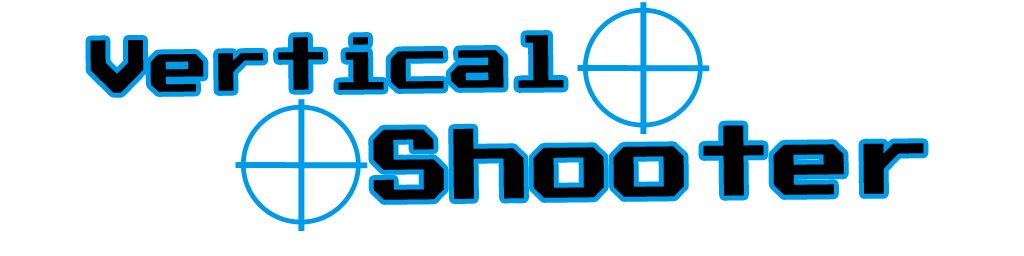
<style>
.page{position:relative;width:1024px;height:256px;background:#ffffff}
.page>*{position:absolute;margin:0}
.t1{font:60px "Atari-Font-Full-Version";color:#000000}
.t2{font:80px "Atari-Font-Full-Version";color:#000000}
</style>
<div class="page">
<p class="t1" style="left:90px;top:35px;width:474px;height:58px;rotate:-1deg">Vertical</p>
<p class="t2" style="left:373px;top:125px;width:551px;height:75px;rotate:-1deg">Shooter</p>
</div>
